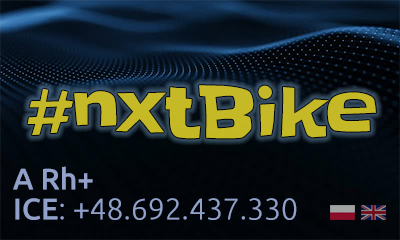
<style>
.page{position:relative;width:400px;height:240px}
.page>*{position:absolute;margin:0}
.t1{font:70px "Slackey-Regular";color:#eede2c}
.t2{font:30px "Ubuntu-Medium";color:#92a2ca}
.t3{font:30px "Ubuntu-Light";color:#92a2ca}
</style>
<div class="page">
<p class="t1" style="left:27px;top:85px;width:349px;height:54px;opacity:0.75">#nxtBike</p>
<p class="t2" style="left:13px;top:166px;width:80px;height:24px">A Rh+</p>
<p class="t3" style="left:15px;top:198px;width:282px;height:22px"><span class="t2">ICE</span>: +48.692.437.330</p>
</div>
